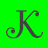
<style>
.page{position:relative;width:48px;height:48px;background:#00ff00}
.page>*{position:absolute;margin:0}
.t1{font:48px "FontleroyBrown";color:#414141}
</style>
<div class="page">
<p class="t1" style="left:6px;top:10px;width:37px;height:29px">K</p>
</div>
